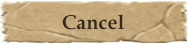
<style>
.page{position:relative;width:188px;height:44px}
.page>*{position:absolute;margin:0}
.t1{font:20px "BookAntiqua-Bold";color:#332a1c}
</style>
<div class="page">
<p class="t1" style="left:62px;top:14px;width:62px;height:16px">Cancel</p>
</div>
